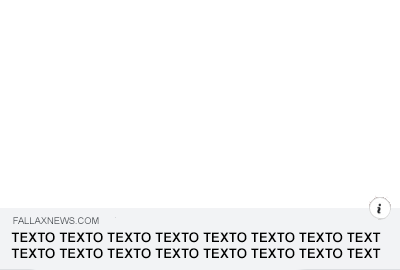
<style>
.page{position:relative;width:400px;height:270px;background:#ffffff}
.page>*{position:absolute;margin:0}
.t1{font:9.3px "ArialMT";color:#43484e}
.t2{font:13.3px "Arial-BoldMT";color:#000000}
</style>
<div class="page">
<p class="t1" style="left:13px;top:217px;width:86px;height:7px">FALLAXNEWS.COM</p>
<p class="t2" style="left:11px;top:232px;width:370px;height:11px">TEXTO TEXTO TEXTO TEXTO TEXTO TEXTO TEXTO TEXT</p>
<p class="t2" style="left:11px;top:248px;width:370px;height:11px">TEXTO TEXTO TEXTO TEXTO TEXTO TEXTO TEXTO TEXT</p>
</div>
